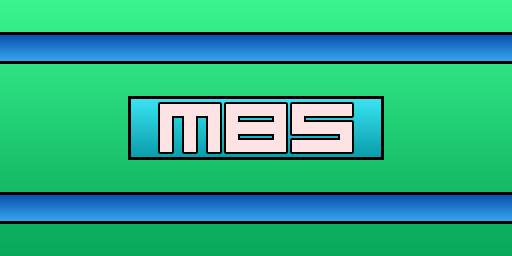
<style>
.page{position:relative;width:512px;height:256px}
.page>*{position:absolute;margin:0}
.t1{font:48px "DaMadRave";color:#fde3e3}
</style>
<div class="page">
<p class="t1" style="left:160px;top:104px;width:192px;height:48px">MBS</p>
</div>
